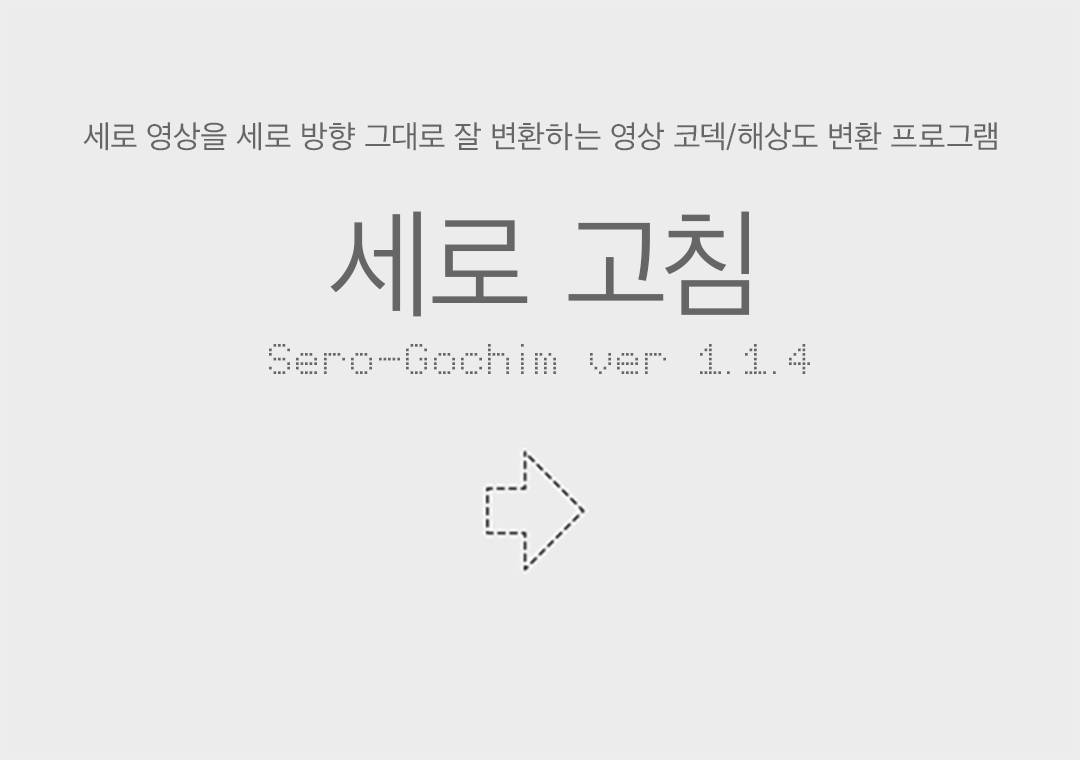
<style>
.page{position:relative;width:1080px;height:760px;background:#edecec}
.page>*{position:absolute;margin:0}
.t1{font:32px "AppleSDGothicNeo-Regular";color:#666666}
.t2{font:120px "AppleSDGothicNeo-Light";color:#666666}
.t3{font:32px "Virtual-Pet-Sans";color:#666666}
</style>
<div class="page">
<p class="t1" style="left:83px;top:122px;width:914px;height:29px">세로 영상을 세로 방향 그대로 잘 변환하는 영상 코덱/해상도 변환 프로그램</p>
<p class="t2" style="left:330px;top:211px;width:420px;height:106px">세로 고침</p>
<p class="t3" style="left:269px;top:344px;width:541px;height:30px">Sero-Gochim ver 1.1.4</p>
</div>
